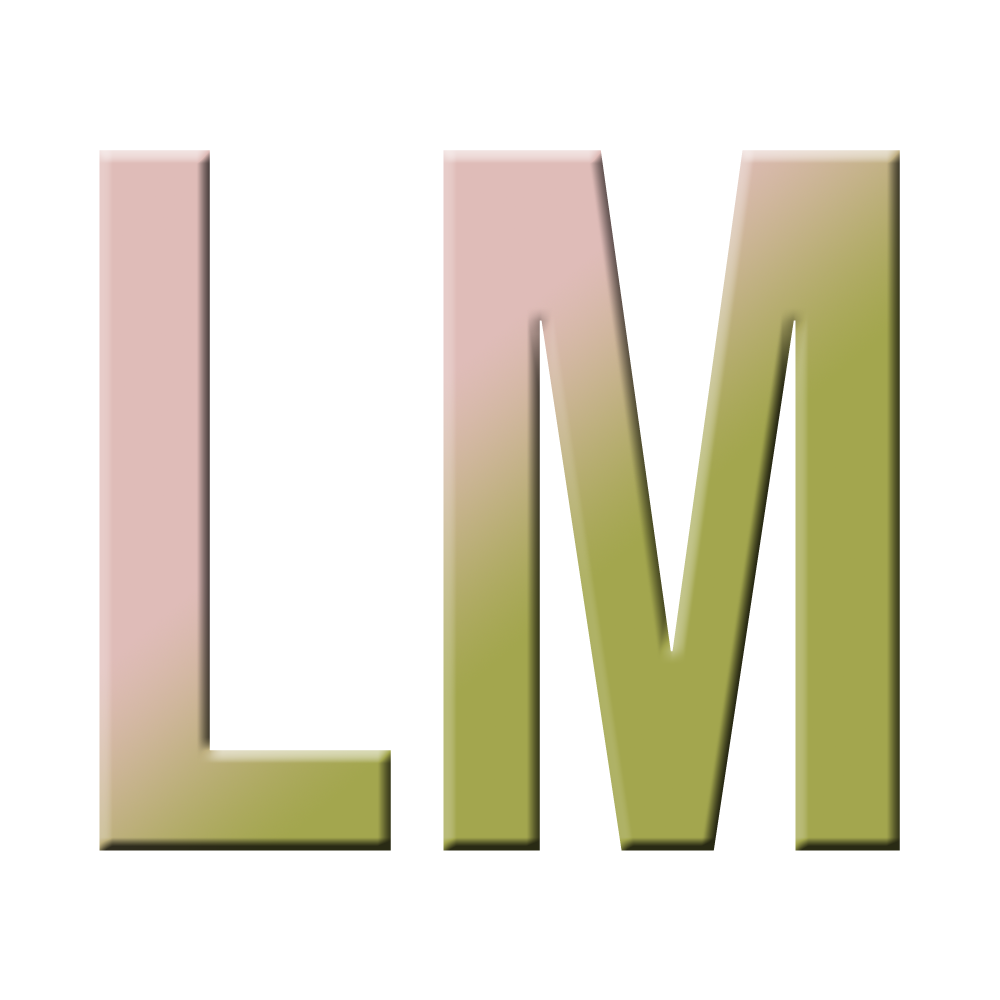
<style>
.page{position:relative;width:1000px;height:1000px;background:#ffffff}
.page>*{position:absolute;margin:0}
.t1{font:1000px "BebasNeue-Regular"}
</style>
<div class="page">
<p class="t1" style="left:99px;top:150px;width:801px;height:701px">LM</p>
</div>
